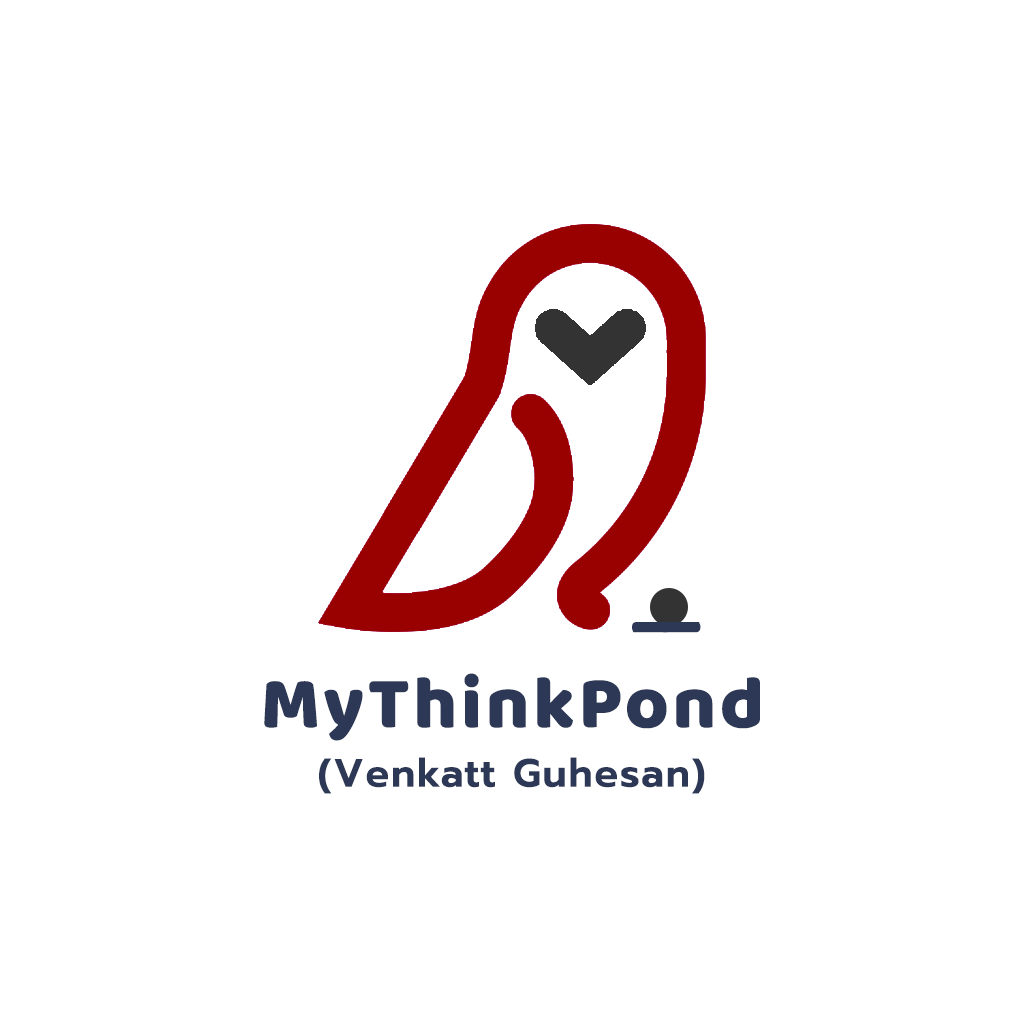
<style>
.page{position:relative;width:1024px;height:1024px;background:#ffffff}
.page>*{position:absolute;margin:0}
.t1{font:75.1px "Baloo-Regular";letter-spacing:0.05em;color:#2c3856}
.t2{font:39.1px "Prompt-SemiBold";letter-spacing:0.05em;color:#2c3856}
</style>
<div class="page">
<p class="t1" style="left:632px;top:622px;width:39px;height:11px">_</p>
<p class="t1" style="left:662px;top:622px;width:39px;height:11px">_</p>
<p class="t1" style="left:264px;top:673px;width:496px;height:68px">MyThinkPond</p>
<p class="t2" style="left:319px;top:757px;width:386px;height:37px">(Venkatt Guhesan)</p>
</div>
